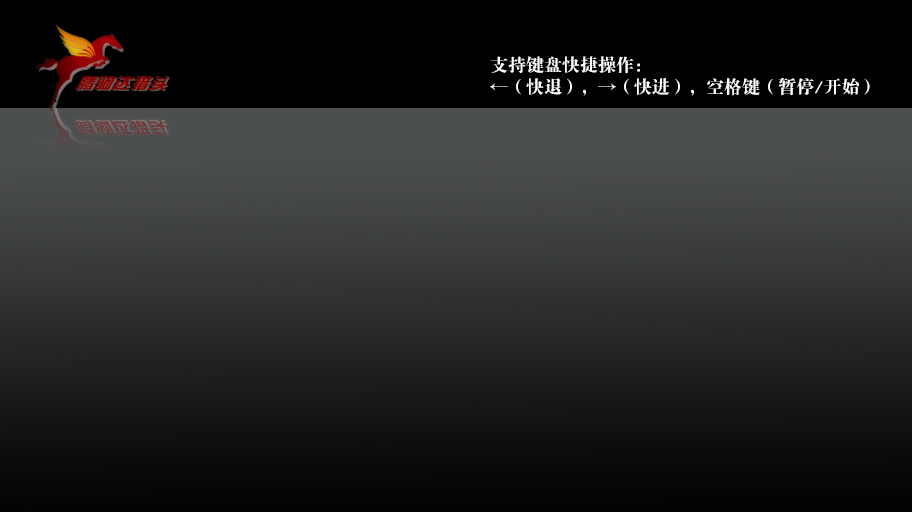
<style>
.page{position:relative;width:912px;height:512px}
.page>*{position:absolute;margin:0}
.t1{font:18px "FZDBSJW--GB1-0";color:#ffffff}
</style>
<div class="page">
<p class="t1" style="left:490px;top:56px;width:380px;height:40px">支持键盘快捷操作： <br>←（快退），→（快进），空格键（暂停/开始）</p>
</div>
